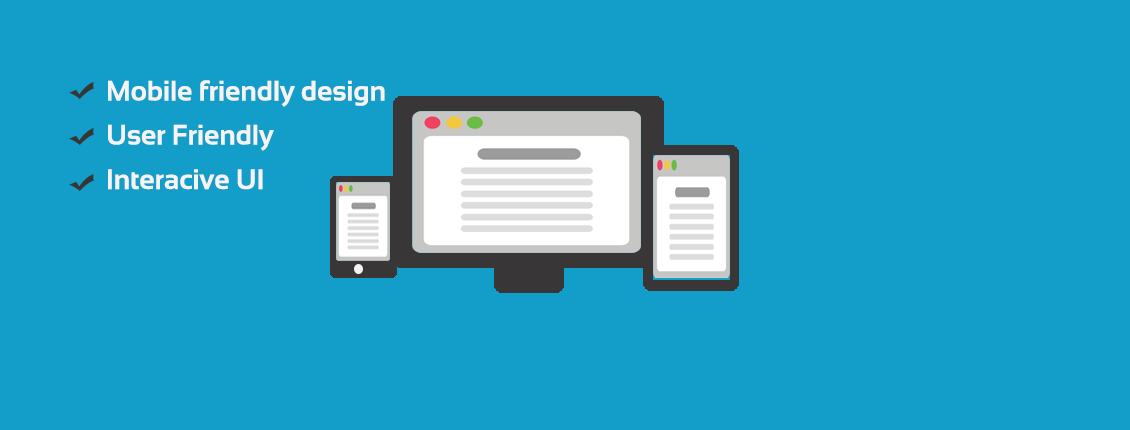
<style>
.page{position:relative;width:1130px;height:430px;background:#139ec9}
.page>*{position:absolute;margin:0}
.t1{font:28px "Sansation-Bold";color:#f5f3f3}
</style>
<div class="page">
<p class="t1" style="left:108px;top:80px;width:277px;height:27px">Mobile friendly design</p>
<p class="t1" style="left:108px;top:124px;width:166px;height:27px">User Friendly</p>
<p class="t1" style="left:108px;top:169px;width:155px;height:21px">Interacive UI</p>
</div>
